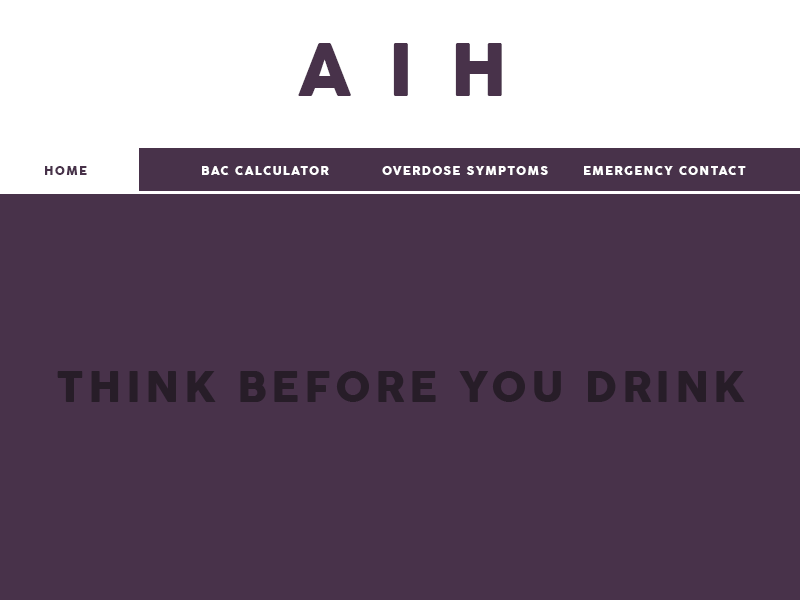
<style>
.page{position:relative;width:800px;height:600px;background:#48324a}
.page>*{position:absolute;margin:0}
.t1{font:72px "Cocogoose";letter-spacing:0.5em;color:#48324a}
.t2{font:12px "Cocogoose";letter-spacing:0.1em;color:#48324a}
.t3{font:12px "Cocogoose";letter-spacing:0.1em;color:#ffffff}
.t4{font:42px "Cocogoose";letter-spacing:0.1em;color:#271d28}
</style>
<div class="page">
<p class="t1" style="left:298px;top:43px;width:204px;height:53px">AIH</p>
<p class="t2" style="left:45px;top:166px;width:42px;height:9px">HOME</p>
<p class="t3" style="left:202px;top:166px;width:127px;height:9px">BAC CALCULATOR</p>
<p class="t3" style="left:382px;top:166px;width:166px;height:9px">OVERDOSE SYMPTOMS</p>
<p class="t3" style="left:584px;top:166px;width:162px;height:9px">EMERGENCY CONTACT</p>
<p class="t4" style="left:57px;top:371px;width:688px;height:31px">THINK BEFORE YOU DRINK</p>
</div>
